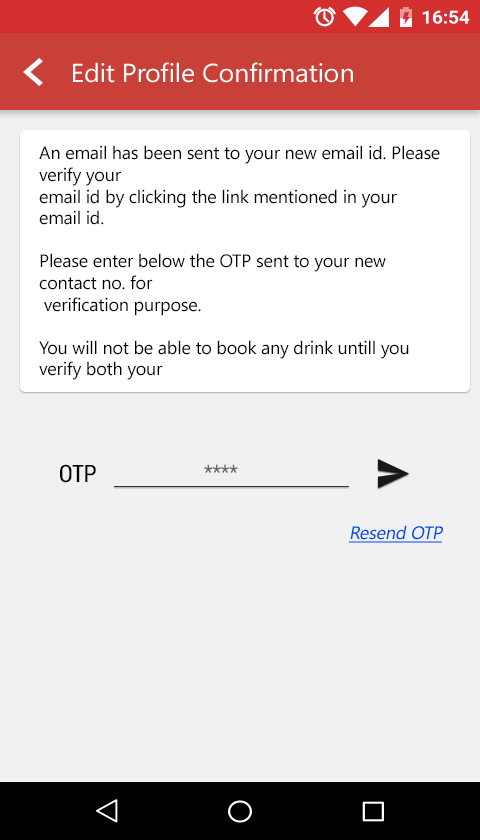
<style>
.page{position:relative;width:480px;height:840px;background:#f1f1f1}
.page>*{position:absolute;margin:0}
.t1{font:26.1px "SegoeUI";letter-spacing:-0.01em;color:#ffffff;scale:1.03 1}
.t2{font:18px "SegoeUISymbol";letter-spacing:-0.01em;color:#000000}
.t3{font:24px "RobotoCondensed-Regular";letter-spacing:-0.01em;color:#000000}
.t4{font:20px "Roboto-Regular";letter-spacing:-0.01em;color:#666666}
.t5{font:18px "SegoeUI";letter-spacing:-0.01em;color:#0848e9;font-style:italic;text-decoration:underline}
</style>
<div class="page">
<p class="t1" style="left:73px;top:62px;width:280px;height:21px">Edit Profile Confirmation</p>
<p class="t2" style="left:39px;top:145px;width:401px;height:235px">An email has been sent to your new email id. Please verify your <br>email id by clicking the link mentioned in your email id.<br><br>Please enter below the OTP sent to your new contact no. for<br> verification purpose.<br><br>You will not be able to book any drink untill you verify both your <br>email id and contact no.<br><br>Also note that you will not be able to change your email id and <br>contact no. within next 10 days.</p>
<p class="t3" style="left:60px;top:464px;width:36px;height:19px">OTP</p>
<p class="t4" style="left:204px;top:464px;width:34px;height:9px">****</p>
<p class="t5" style="left:349px;top:525px;width:94px;height:18px">Resend OTP</p>
</div>
